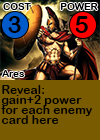
<style>
.page{position:relative;width:100px;height:140px;background:#795b01}
.page>*{position:absolute;margin:0}
.t1{font:9.7px "ArialRoundedMTBold";letter-spacing:0.01em;color:#000000}
.t2{font:24px "ArialRoundedMTBold";letter-spacing:0.01em;color:#000000}
.t3{font:24px "ArialRoundedMTBold";letter-spacing:-0.1em;color:#000000}
.t4{font:12px/10px "ArialRoundedMTBold";letter-spacing:0.01em;color:#000000}
</style>
<div class="page">
<p class="t1" style="left:3px;top:3px;width:28px;height:7px">COST</p>
<p class="t1" style="left:60px;top:3px;width:38px;height:7px">POWER</p>
<p class="t2" style="left:8px;top:16px;width:13px;height:17px">3</p>
<p class="t3" style="left:75px;top:16px;width:13px;height:17px">5</p>
<p class="t1" style="left:2px;top:70px;width:23px;height:7px">Ares</p>
<p class="t4" style="left:1px;top:85px;width:91px;height:39px">Reveal:<br>gain+2 power <br>for each enemy <br>card here</p>
</div>
